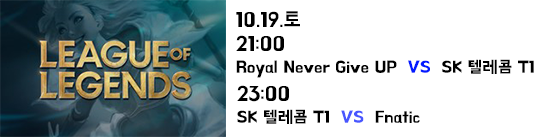
<style>
.page{position:relative;width:543px;height:137px;background:#ffffff}
.page>*{position:absolute;margin:0}
.t1{font:20.8px "BMHANNA11yrsold";color:#000000}
.t2{font:16.7px/25px "BMHANNA11yrsold";color:#000000}
.t3{font:20.8px/25px "BMHANNA11yrsold";color:#000000}
.t4{font:16.7px/25px "BMHANNA11yrsold";color:#021aff}
.t5{font:16.7px/25px "BMHANNA11yrsold";color:#4856ff}
</style>
<div class="page">
<p class="t1" style="left:236px;top:11px;width:64px;height:16px">10.19.토</p>
<p class="t2" style="left:236px;top:35px;width:298px;height:43px"><span class="t3">21:00<br></span>Royal Never Give UP  <span class="t4">VS</span>  SK 텔레콤 T1</p>
<p class="t2" style="left:237px;top:85px;width:183px;height:39px"><span class="t3">23:00<br></span>SK 텔레콤 T1  <span class="t5">VS</span>  Fnatic</p>
</div>
